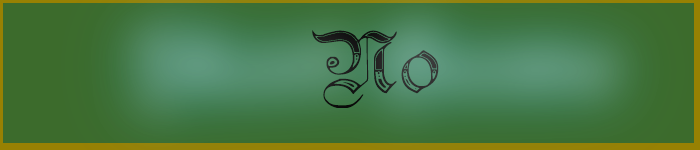
<style>
.page{position:relative;width:700px;height:150px}
.page>*{position:absolute;margin:0}
.t1{font:72px "TeutonicNo4-DemiBold";color:#1d1d1d}
</style>
<div class="page">
<p class="t1" style="left:312px;top:30px;width:127px;height:78px">No</p>
</div>
